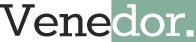
<style>
.page{position:relative;width:196px;height:42px;background:#ffffff}
.page>*{position:absolute;margin:0}
.t1{font:56.8px "Rokkitt";letter-spacing:-0.025em;color:#282926}
.t2{font:56.8px "Rokkitt";letter-spacing:-0.025em;color:#ffffff}
.t3{font:56.8px "Rokkitt";letter-spacing:-0.025em;color:#ffffff;font-weight:bold}
</style>
<div class="page">
<p class="t1" style="left:0px;top:4px;width:194px;height:33px">Vene<span class="t2">dor</span><span class="t3">.</span></p>
</div>
